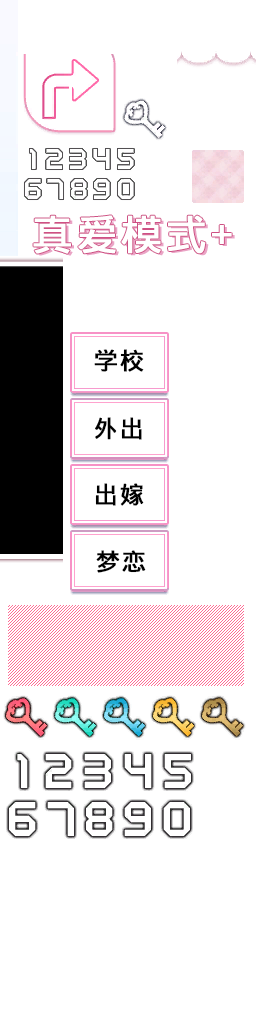
<style>
.page{position:relative;width:256px;height:1024px;background:#ffffff}
.page>*{position:absolute;margin:0}
.t1{font:41.3px "WenQuanYiMicroHeiMono";letter-spacing:0.05em;color:#ffffff;font-weight:bold}
.t2{font:41.3px "WenQuanYiMicroHeiMono";letter-spacing:0.05em;font-weight:bold}
.t3{font:24px "WenQuanYiMicroHeiMono";letter-spacing:0.05em;color:#000000;font-weight:bold}
</style>
<div class="page">
<p class="t1" style="left:33px;top:215px;width:199px;height:39px">真爱模式+</p>
<p class="t2" style="left:36px;top:217px;width:199px;height:39px">真爱模式+</p>
<p class="t3" style="left:94px;top:349px;width:50px;height:23px">学校</p>
<p class="t3" style="left:95px;top:417px;width:47px;height:23px">外出</p>
<p class="t3" style="left:95px;top:483px;width:49px;height:23px">出嫁</p>
<p class="t3" style="left:96px;top:550px;width:50px;height:23px">梦恋</p>
</div>
